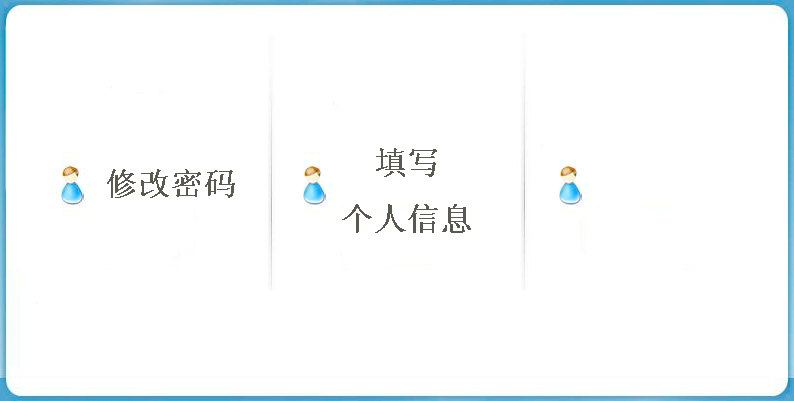
<style>
.page{position:relative;width:794px;height:401px;background:#ffffff}
.page>*{position:absolute;margin:0}
.t1{font:32px "System";color:#5a5950}
</style>
<div class="page">
<p class="t1" style="left:342px;top:148px;width:129px;height:85px;text-align:center">填写<br>个人信息</p>
<p class="t1" style="left:107px;top:169px;width:128px;height:29px">修改密码</p>
</div>
